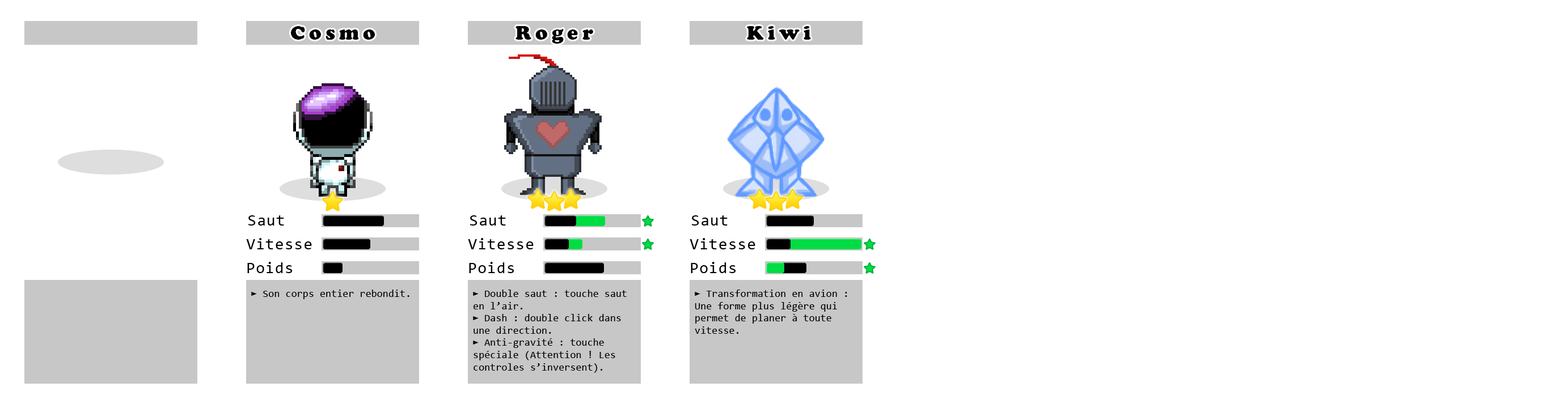
<style>
.page{position:relative;width:1568px;height:408px;background:#ffffff}
.page>*{position:absolute;margin:0}
.t1{font:20.4px "CooperBlack";letter-spacing:0.2em;color:#000000}
.t2{font:15.9px "Consolas";letter-spacing:0.05em;color:#000000}
.t3{font:10.2px "Consolas";letter-spacing:0.01em;color:#000000}
</style>
<div class="page">
<p class="t1" style="left:290px;top:26px;width:85px;height:14px">Cosmo</p>
<p class="t1" style="left:515px;top:26px;width:78px;height:18px">Roger</p>
<p class="t1" style="left:747px;top:26px;width:64px;height:14px">Kiwi</p>
<p class="t2" style="left:248px;top:215px;width:36px;height:11px">Saut</p>
<p class="t2" style="left:470px;top:215px;width:36px;height:11px">Saut</p>
<p class="t2" style="left:692px;top:215px;width:36px;height:11px">Saut</p>
<p class="t2" style="left:246px;top:238px;width:66px;height:12px">Vitesse</p>
<p class="t2" style="left:468px;top:238px;width:66px;height:12px">Vitesse</p>
<p class="t2" style="left:690px;top:238px;width:65px;height:12px">Vitesse</p>
<p class="t2" style="left:247px;top:262px;width:45px;height:11px">Poids</p>
<p class="t2" style="left:469px;top:262px;width:45px;height:11px">Poids</p>
<p class="t2" style="left:691px;top:262px;width:45px;height:11px">Poids</p>
<p class="t3" style="left:251px;top:290px;width:158px;height:9px">► Son corps entier rebondit.</p>
<p class="t3" style="left:473px;top:290px;width:154px;height:83px">► Double saut : touche saut<br>en l’air.<br>► Dash : double click dans<br>une direction.<br>► Anti-gravité : touche <br>spéciale (Attention ! Les <br>controles s’inversent).</p>
<p class="t3" style="left:695px;top:290px;width:152px;height:44px">► Transformation en avion :<br>Une forme plus légère qui<br>permet de planer à toute <br>vitesse.</p>
</div>
